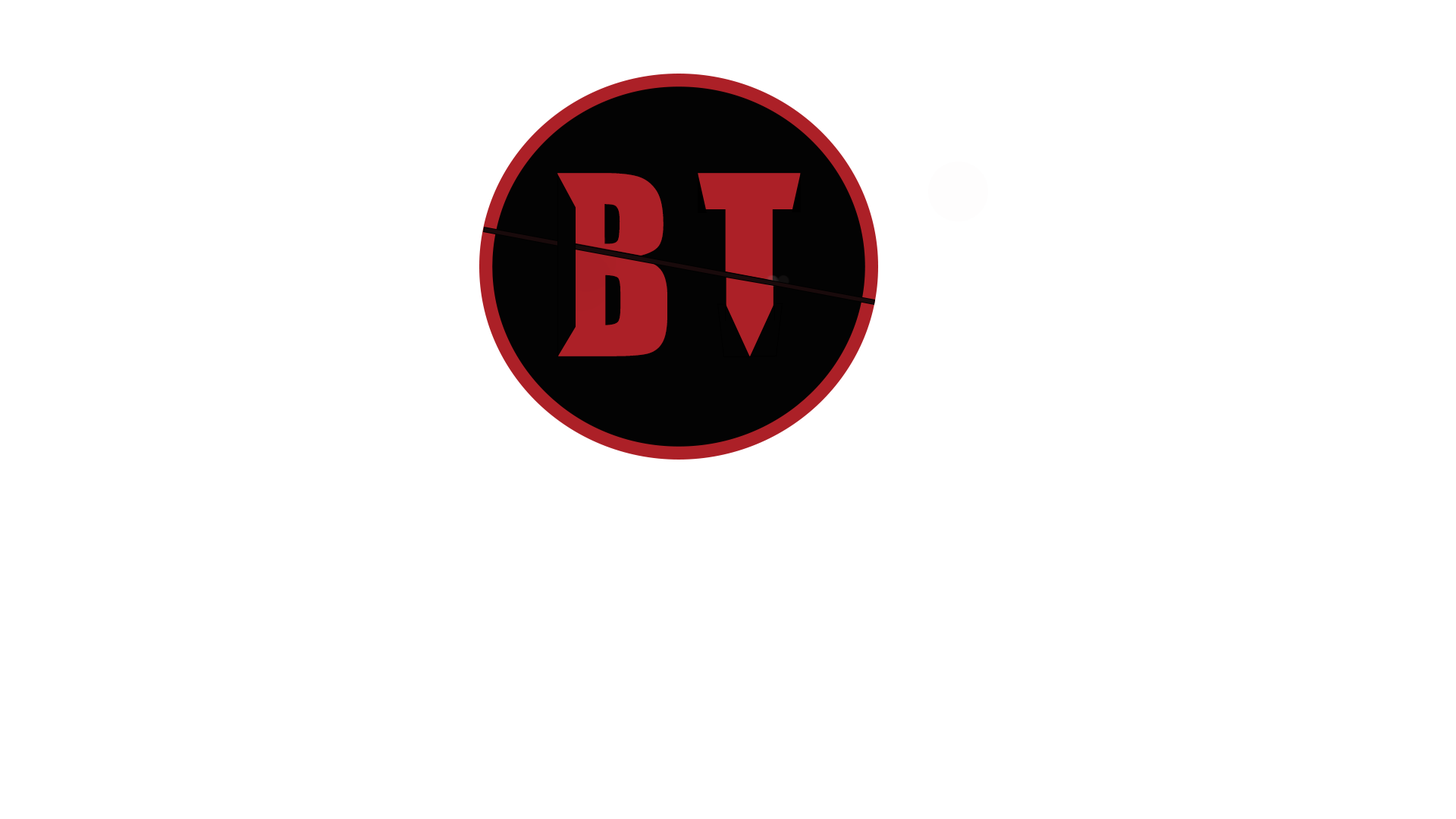
<style>
.page{position:relative;width:1456px;height:819px;background:#ffffff}
.page>*{position:absolute;margin:0}
.t1{font:227.5px "Impact";letter-spacing:0.1em;color:#ac2027}
</style>
<div class="page">
<p class="t1" style="left:557px;top:173px;width:244px;height:180px">BT</p>
<p class="t1" style="left:558px;top:176px;width:244px;height:180px">BT</p>
</div>
